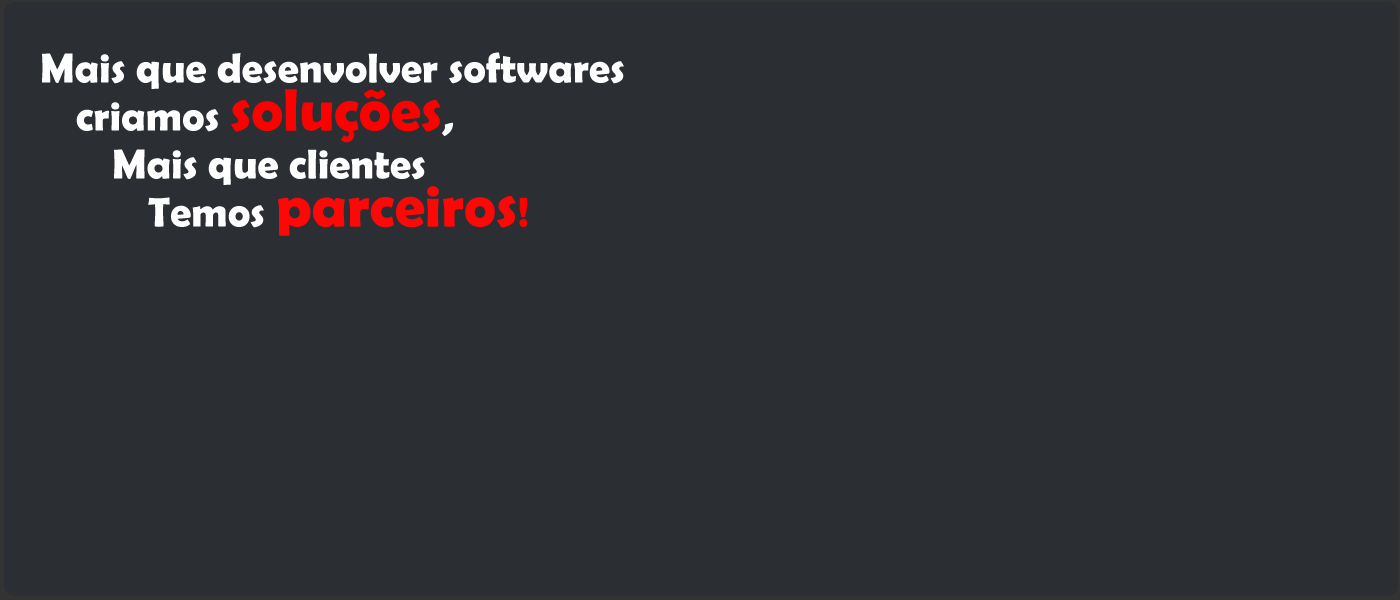
<style>
.page{position:relative;width:1400px;height:600px;background:#2b2f33}
.page>*{position:absolute;margin:0}
.t1{font:42px/48px "BerlinSansFBDemi-Bold";color:#fefefe}
.t2{font:60px/48px "BerlinSansFBDemi-Bold";color:#fd0101}
.t3{font:60px/48px "BerlinSansFBDemi-Bold";color:#fe0707}
.t4{font:42px/48px "BerlinSansFBDemi-Bold";color:#fd0000}
</style>
<div class="page">
<p class="t1" style="left:42px;top:52px;width:582px;height:184px">Mais que desenvolver softwares<br> criamos <span class="t2">soluções</span>,<br>  Mais que clientes<br>   Temos <span class="t3">parceiros</span><span class="t4">!</span></p>
</div>
